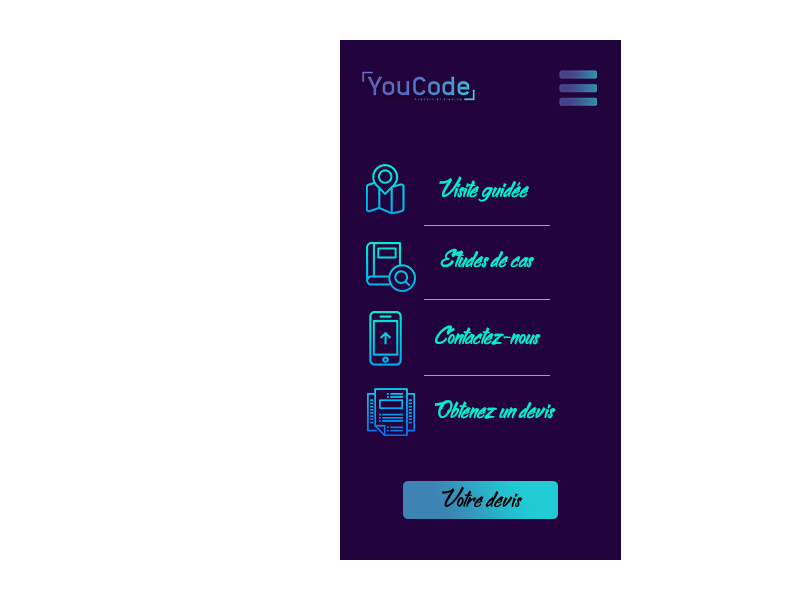
<style>
.page{position:relative;width:800px;height:600px;background:#ffffff}
.page>*{position:absolute;margin:0}
.t1{font:20px "Bethsy";color:#00eed1}
.t2{font:20px "Bethsy";color:#000000}
</style>
<div class="page">
<p class="t1" style="left:439px;top:176px;width:90px;height:26px">Visite guidée</p>
<p class="t1" style="left:440px;top:248px;width:95px;height:20px">Etudes de cas</p>
<p class="t1" style="left:435px;top:325px;width:106px;height:20px">Contactez-nous</p>
<p class="t1" style="left:435px;top:400px;width:121px;height:19px">Obtenez un devis</p>
<p class="t2" style="left:442px;top:486px;width:81px;height:22px">Votre devis</p>
</div>
